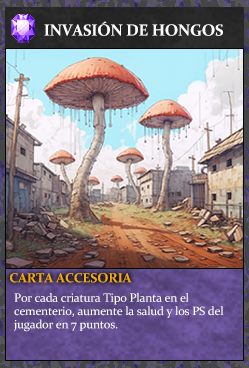
<style>
.page{position:relative;width:249px;height:368px}
.page>*{position:absolute;margin:0}
.t1{font:16px "Constantia-Bold";letter-spacing:-0.02em;color:#ffffff}
.t2{font:13.3px "Constantia-Bold";letter-spacing:-0.02em;color:#f2ac05}
.t3{font:12px/13.3px "Constantia";letter-spacing:-0.02em;color:#ffffff}
</style>
<div class="page">
<p class="t1" style="left:44px;top:21px;width:179px;height:15px">INVASIÓN DE HONGOS</p>
<p class="t2" style="left:10px;top:273px;width:122px;height:10px">CARTA ACCESORIA</p>
<p class="t3" style="left:14px;top:293px;width:210px;height:39px">Por cada criatura Tipo Planta en el <br>cementerio, aumente la salud y los PS del<br>jugador en 7 puntos.</p>
</div>
